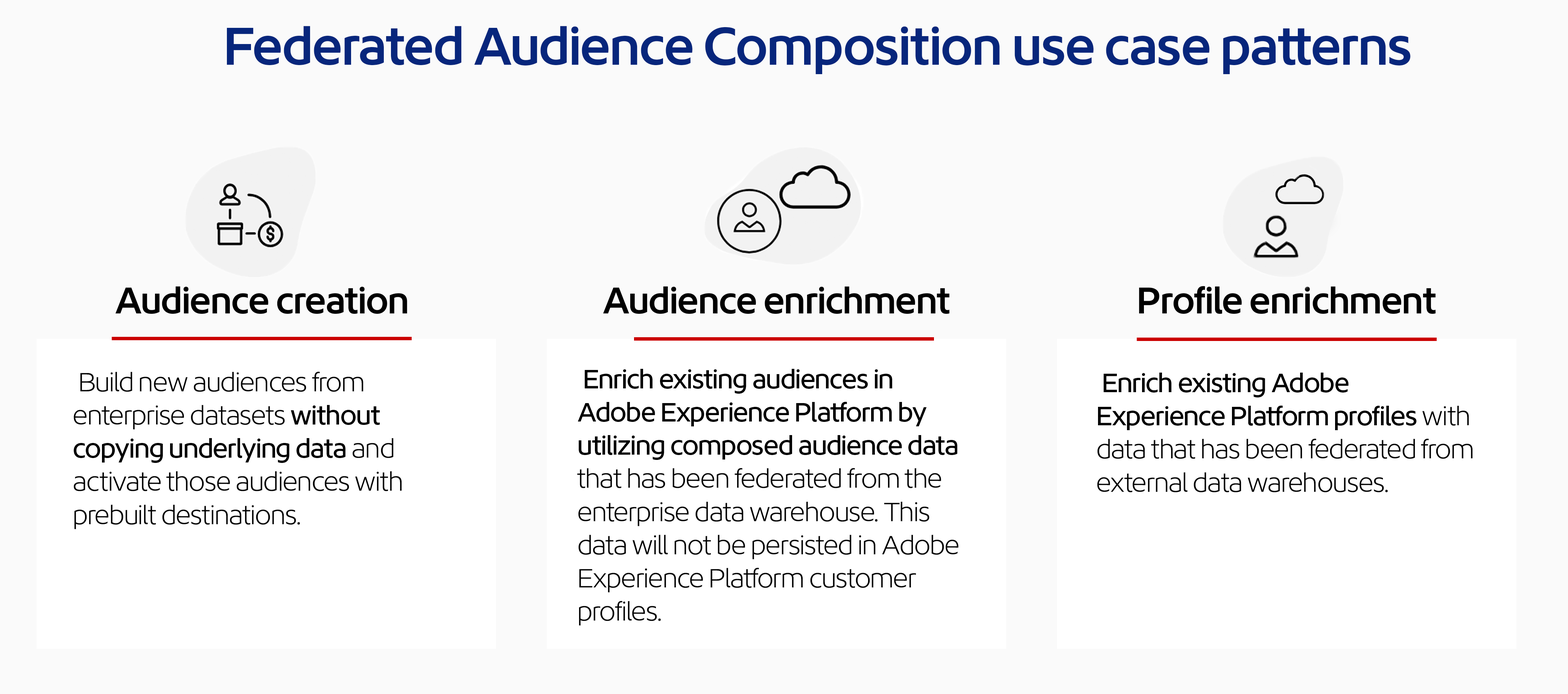
<style>
.page{position:relative;width:1568px;height:694px;background:#fafafa}
.page>*{position:absolute;margin:0}
.t1{font:55.3px "AdobeCleanDisplay-SemiBold";color:#07267c}
.t2{font:38.7px "AdobeCleanDisplay-SemiBold";color:#000000}
.t3{font:27.7px "AdobeCleanDisplay-Light";color:#000000}
.t4{font:27.7px "AdobeCleanDisplay-Regular";color:#000000}
.t5{font:27.7px "AdobeCleanDisplay-Medium";color:#000000}
</style>
<div class="page">
<p class="t1" style="left:227px;top:26px;width:1183px;height:48px">Federated Audience Composition use case patterns</p>
<p class="t2" style="left:115px;top:286px;width:292px;height:28px">Audience creation</p>
<p class="t2" style="left:603px;top:286px;width:347px;height:28px">Audience enrichment</p>
<p class="t2" style="left:1139px;top:286px;width:297px;height:28px">Profile enrichment</p>
<p class="t3" style="left:74px;top:371px;width:328px;height:158px;text-align:justify"><span class="t4"><br></span>Build new audiences from enterprise datasets <span class="t5">without copying underlying data </span>and activate those audiences with prebuilt destinations.</p>
<p class="t3" style="left:577px;top:369px;width:381px;height:256px"><span class="t4"><br></span><span class="t5">Enrich existing audiences in Adobe Experience Platform by utilizing composed audience data </span>that has been federated from the enterprise data warehouse. This data will not be persisted in Adobe Experience Platform customer profiles.</p>
<p class="t3" style="left:1097px;top:373px;width:376px;height:119px"><span class="t5">Enrich existing Adobe Experience Platform profiles</span> with data that has been federated from external data warehouses.</p>
</div>
